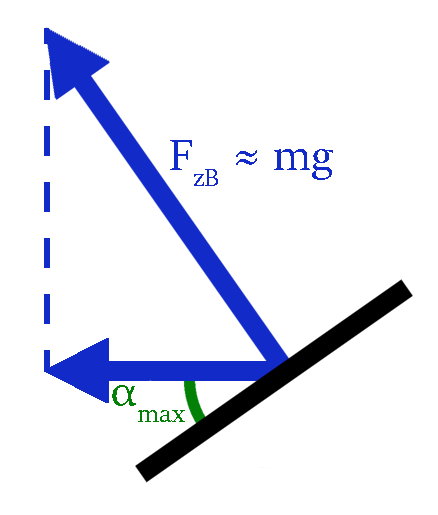
<style>
.page{position:relative;width:438px;height:515px;background:#ffffff}
.page>*{position:absolute;margin:0}
.t1{font:48px "SitkaDisplay";color:#112ac8}
.t2{font:48px "SitkaDisplay";color:#028106}
</style>
<div class="page">
<p class="t1" style="left:170px;top:140px;width:163px;height:46px">FzB ≈ mg</p>
<p class="t2" style="left:112px;top:385px;width:73px;height:37px">αmax</p>
</div>
